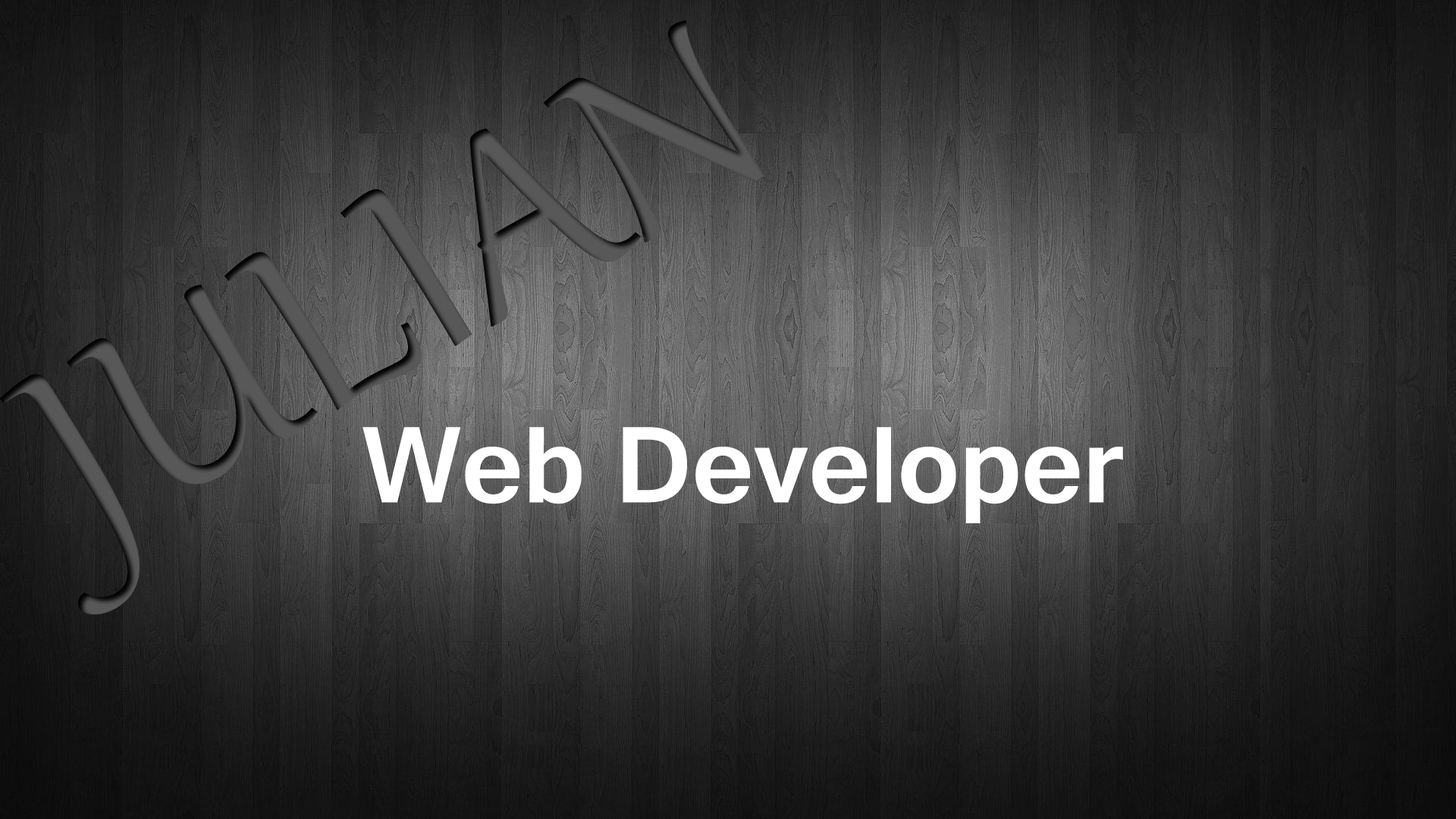
<style>
.page{position:relative;width:1456px;height:819px}
.page>*{position:absolute;margin:0}
.t1{font:113.7px "Gautami-Bold";color:#ffffff}
</style>
<div class="page">
<p class="t1" style="left:362px;top:427px;width:761px;height:96px">Web Developer</p>
</div>
